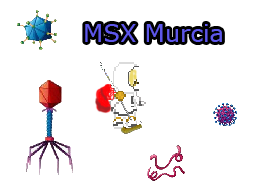
<style>
.page{position:relative;width:256px;height:192px;background:#ffffff}
.page>*{position:absolute;margin:0}
.t1{font:24px "Verdana";color:#5e57ea}
</style>
<div class="page">
<p class="t1" style="left:85px;top:24px;width:137px;height:18px">MSX Murcia</p>
</div>
